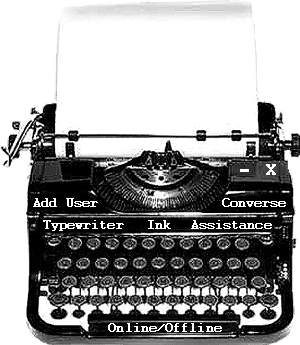
<style>
.page{position:relative;width:300px;height:345px;background:#ffffff}
.page>*{position:absolute;margin:0}
.t1{font:12px "Courier";letter-spacing:-0.075em;color:#ffffff;font-weight:bold}
</style>
<div class="page">
<p class="t1" style="left:33px;top:198px;width:65px;height:9px">Add User</p>
<p class="t1" style="left:222px;top:198px;width:64px;height:9px">Converse</p>
<p class="t1" style="left:43px;top:220px;width:81px;height:11px">Typewriter</p>
<p class="t1" style="left:148px;top:220px;width:23px;height:9px">Ink</p>
<p class="t1" style="left:191px;top:220px;width:81px;height:9px">Assistance</p>
<p class="t1" style="left:108px;top:323px;width:114px;height:9px">Online/Offline</p>
</div>
